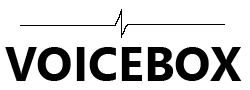
<style>
.page{position:relative;width:250px;height:90px;background:#ffffff}
.page>*{position:absolute;margin:0}
.t1{font:48px "SegoeUI-Bold";color:#000000}
</style>
<div class="page">
<p class="t1" style="left:5px;top:47px;width:237px;height:34px">VOICEBOX</p>
</div>
